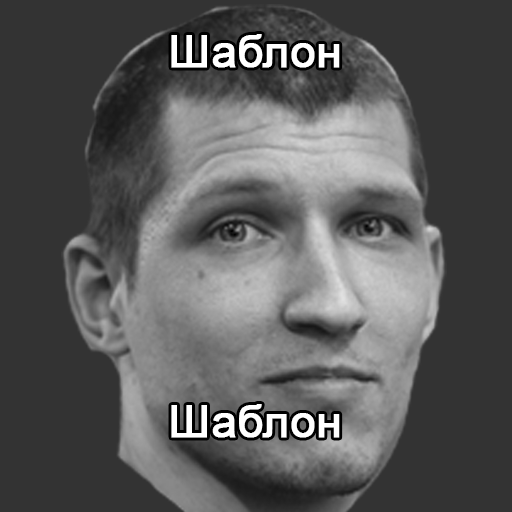
<style>
.page{position:relative;width:512px;height:512px;background:#333333}
.page>*{position:absolute;margin:0}
.t1{font:45px "ArialMT";color:#ffffff;font-weight:bold}
</style>
<div class="page">
<p class="t1" style="left:171px;top:34px;width:169px;height:34px">Шаблон</p>
<p class="t1" style="left:171px;top:404px;width:169px;height:34px">Шаблон</p>
</div>
